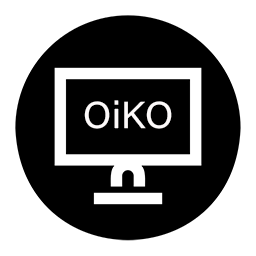
<style>
.page{position:relative;width:256px;height:256px;background:#000000}
.page>*{position:absolute;margin:0}
.t1{font:37.5px "AcuminConcept-Regular";letter-spacing:0.01em;color:#fdfafa;font-style:italic}
</style>
<div class="page">
<p class="t1" style="left:84px;top:100px;width:88px;height:29px">OiKO</p>
</div>
